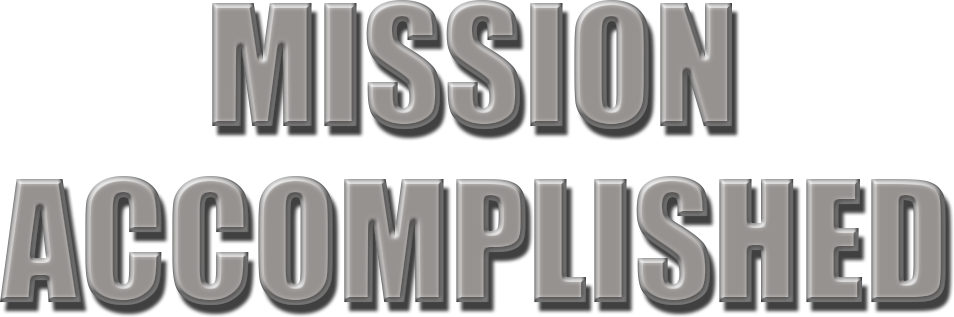
<style>
.page{position:relative;width:954px;height:317px;background:#ffffff}
.page>*{position:absolute;margin:0}
.t1{font:156px "Impact";color:#969290;text-transform:uppercase}
</style>
<div class="page">
<p class="t1" style="left:212px;top:0px;width:520px;height:129px">missioN</p>
<p class="t1" style="left:0px;top:176px;width:946px;height:129px">accomplished</p>
</div>
